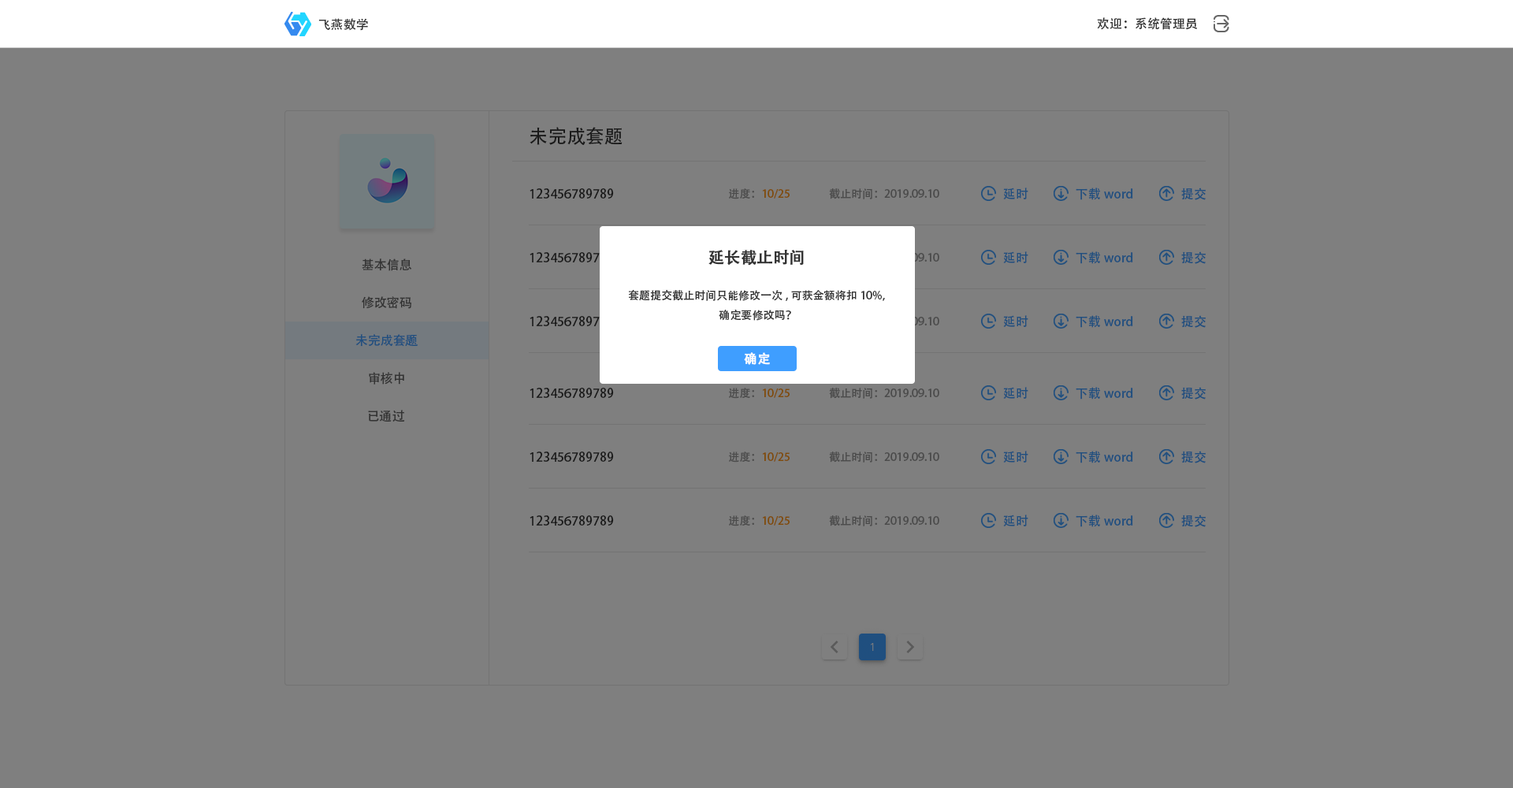
<style>
.page{position:relative;width:1513px;height:788px;background:#7f7f7f}
.page>*{position:absolute;margin:0}
.t1{font:12.6px "AdobeHeitiStd-Regular";color:#333333}
.t2{font:18.9px "AdobeHeitiStd-Regular";color:#191919}
.t3{font:12.6px "AdobeHeitiStd-Regular";color:#191919}
.t4{font:11px "AdobeHeitiStd-Regular"}
.t5{font:11px "AdobeHeitiStd-Regular";color:#4c4c4c}
.t6{font:12.6px "AdobeHeitiStd-Regular";color:#204f7f}
.t7{font:15.8px "AdobeHeitiStd-Regular";color:#333333;font-weight:bold}
.t8{font:11px "AdobeHeitiStd-Regular";color:#333333}
.t9{font:12.6px "AdobeHeitiStd-Regular";color:#fefefe;font-weight:bold}
</style>
<div class="page">
<p class="t1" style="left:1097px;top:17px;width:101px;height:13px">欢迎：系统管理员</p>
<p class="t1" style="left:318px;top:18px;width:50px;height:13px">飞燕数学</p>
<p class="t2" style="left:530px;top:127px;width:93px;height:18px">未完成套题</p>
<p class="t3" style="left:530px;top:188px;width:84px;height:11px">123456789789</p>
<p class="t4" style="left:729px;top:188px;width:61px;height:11px">进度：10/25</p>
<p class="t5" style="left:829px;top:188px;width:110px;height:11px">截止时间：2019.09.10</p>
<p class="t6" style="left:1003px;top:188px;width:25px;height:11px">延时</p>
<p class="t6" style="left:1076px;top:188px;width:57px;height:12px">下载word</p>
<p class="t6" style="left:1181px;top:188px;width:25px;height:12px">提交</p>
<p class="t3" style="left:530px;top:252px;width:84px;height:10px">123456789789</p>
<p class="t7" style="left:708px;top:250px;width:96px;height:16px">延长截止时间</p>
<p class="t6" style="left:1003px;top:251px;width:25px;height:12px">延时</p>
<p class="t6" style="left:1076px;top:251px;width:57px;height:13px">下载word</p>
<p class="t6" style="left:1181px;top:251px;width:25px;height:13px">提交</p>
<p class="t1" style="left:362px;top:258px;width:50px;height:13px">基本信息</p>
<p class="t8" style="left:628px;top:289px;width:257px;height:32px;text-align:center">套题提交截止时间只能修改一次,可获金额将扣10%，<br>确定要修改吗？</p>
<p class="t1" style="left:362px;top:296px;width:49px;height:13px">修改密码</p>
<p class="t3" style="left:530px;top:316px;width:84px;height:10px">123456789789</p>
<p class="t6" style="left:1003px;top:315px;width:25px;height:12px">延时</p>
<p class="t6" style="left:1076px;top:315px;width:57px;height:13px">下载word</p>
<p class="t6" style="left:1181px;top:315px;width:25px;height:13px">提交</p>
<p class="t6" style="left:355px;top:334px;width:63px;height:13px">未完成套题</p>
<p class="t9" style="left:744px;top:352px;width:26px;height:13px">确定</p>
<p class="t1" style="left:369px;top:372px;width:35px;height:13px">审核中</p>
<p class="t3" style="left:530px;top:388px;width:84px;height:10px">123456789789</p>
<p class="t4" style="left:729px;top:388px;width:61px;height:11px">进度：10/25</p>
<p class="t5" style="left:829px;top:388px;width:110px;height:11px">截止时间：2019.09.10</p>
<p class="t6" style="left:1003px;top:387px;width:25px;height:12px">延时</p>
<p class="t6" style="left:1076px;top:387px;width:57px;height:13px">下载word</p>
<p class="t6" style="left:1181px;top:387px;width:25px;height:13px">提交</p>
<p class="t1" style="left:368px;top:410px;width:37px;height:12px">已通过</p>
<p class="t3" style="left:530px;top:452px;width:84px;height:10px">123456789789</p>
<p class="t4" style="left:729px;top:452px;width:61px;height:11px">进度：10/25</p>
<p class="t5" style="left:829px;top:452px;width:110px;height:11px">截止时间：2019.09.10</p>
<p class="t6" style="left:1003px;top:451px;width:25px;height:12px">延时</p>
<p class="t6" style="left:1076px;top:451px;width:57px;height:12px">下载word</p>
<p class="t6" style="left:1181px;top:451px;width:25px;height:12px">提交</p>
<p class="t3" style="left:530px;top:515px;width:84px;height:11px">123456789789</p>
<p class="t4" style="left:729px;top:515px;width:61px;height:11px">进度：10/25</p>
<p class="t5" style="left:829px;top:515px;width:110px;height:11px">截止时间：2019.09.10</p>
<p class="t6" style="left:1003px;top:515px;width:25px;height:11px">延时</p>
<p class="t6" style="left:1076px;top:515px;width:57px;height:12px">下载word</p>
<p class="t6" style="left:1181px;top:515px;width:25px;height:12px">提交</p>
</div>
